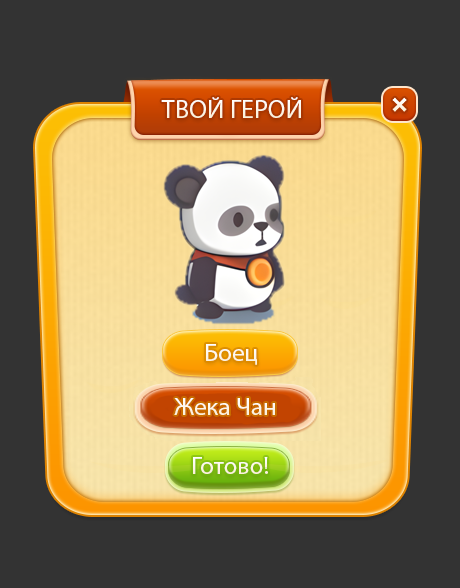
<style>
.page{position:relative;width:460px;height:588px;background:#333333}
.page>*{position:absolute;margin:0}
.t1{font:26px "MyriadPro-Regular";color:#ffffff}
.t2{font:25px "MyriadPro-Regular";color:#ffffff}
.t3{font:25px "MyriadPro-Regular";color:#fdf6e8}
</style>
<div class="page">
<p class="t1" style="left:161px;top:97px;width:140px;height:21px">ТВОЙ ГЕРОЙ</p>
<p class="t2" style="left:206px;top:344px;width:51px;height:21px">Боец</p>
<p class="t3" style="left:174px;top:398px;width:101px;height:17px">Жека Чан</p>
<p class="t3" style="left:193px;top:457px;width:75px;height:17px">Готово!</p>
</div>
